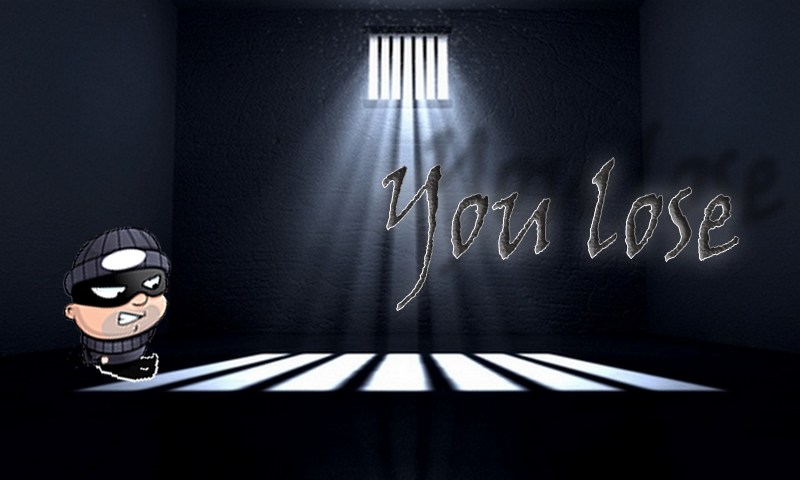
<style>
.page{position:relative;width:800px;height:480px}
.page>*{position:absolute;margin:0}
.t1{font:130px "VinerHandITC";scale:0.77 1}
</style>
<div class="page">
<p class="t1" style="left:382px;top:157px;width:358px;height:154px">You lose</p>
</div>
